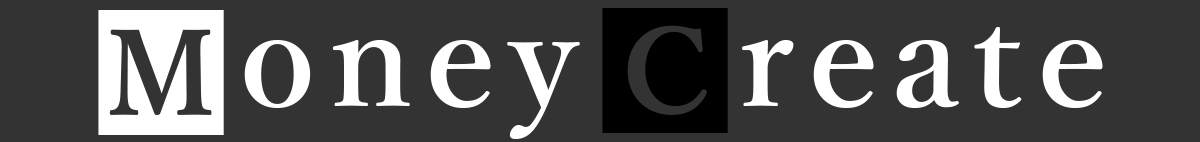
<style>
.page{position:relative;width:1200px;height:142px;background:#333333}
.page>*{position:absolute;margin:0}
.t1{font:140px "YuMincho-Demibold";letter-spacing:0.1em;color:#ffffff}
.t2{font:140px "YuMincho-Demibold";letter-spacing:0.1em;color:#000000}
</style>
<div class="page">
<p class="t1" style="left:98px;top:10px;width:126px;height:125px">M</p>
<p class="t2" style="left:602px;top:8px;width:126px;height:125px">C</p>
<p class="t1" style="left:742px;top:27px;width:361px;height:81px">reate</p>
<p class="t1" style="left:244px;top:40px;width:336px;height:99px">oney</p>
</div>
